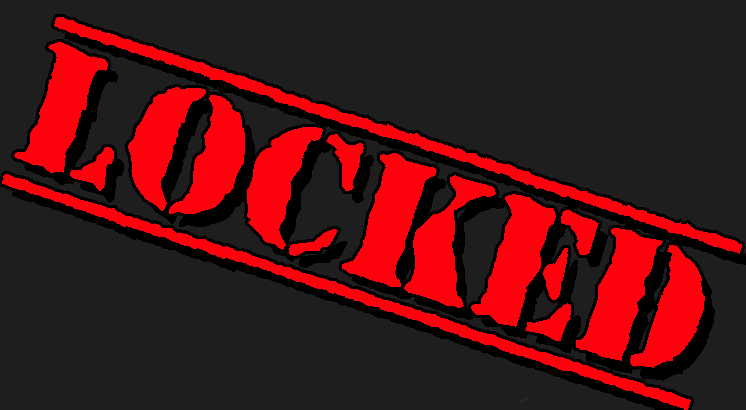
<style>
.page{position:relative;width:746px;height:410px;background:#1e1e1e}
.page>*{position:absolute;margin:0}
.t1{font:185.2px "TopSecret-Bold";color:#ff000d}
</style>
<div class="page">
<p class="t1" style="left:2px;top:17px;width:740px;height:393px;rotate:18deg">LOCKED</p>
</div>
